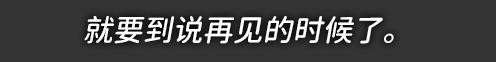
<style>
.page{position:relative;width:496px;height:62px;background:#333333}
.page>*{position:absolute;margin:0}
.t1{font:30px "Resource-Han-Rounded-CN-Medium";color:#ffffff;font-style:italic}
</style>
<div class="page">
<p class="t1" style="left:84px;top:16px;width:310px;height:28px">就要到说再见的时候了。</p>
</div>
